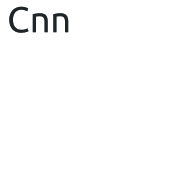
<style>
.page{position:relative;width:190px;height:190px;background:#ffffff}
.page>*{position:absolute;margin:0}
.t1{font:36px "Ubuntu";color:#1f2526}
</style>
<div class="page">
<p class="t1" style="left:9px;top:6px;width:60px;height:27px">Cnn</p>
</div>
